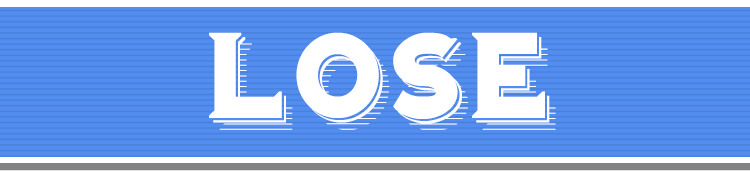
<style>
.page{position:relative;width:750px;height:171px;background:#528df0}
.page>*{position:absolute;margin:0}
.t1{font:106.7px "Hominis";color:#ffffff}
</style>
<div class="page">
<p class="t1" style="left:209px;top:32px;width:347px;height:98px">Lose</p>
</div>
